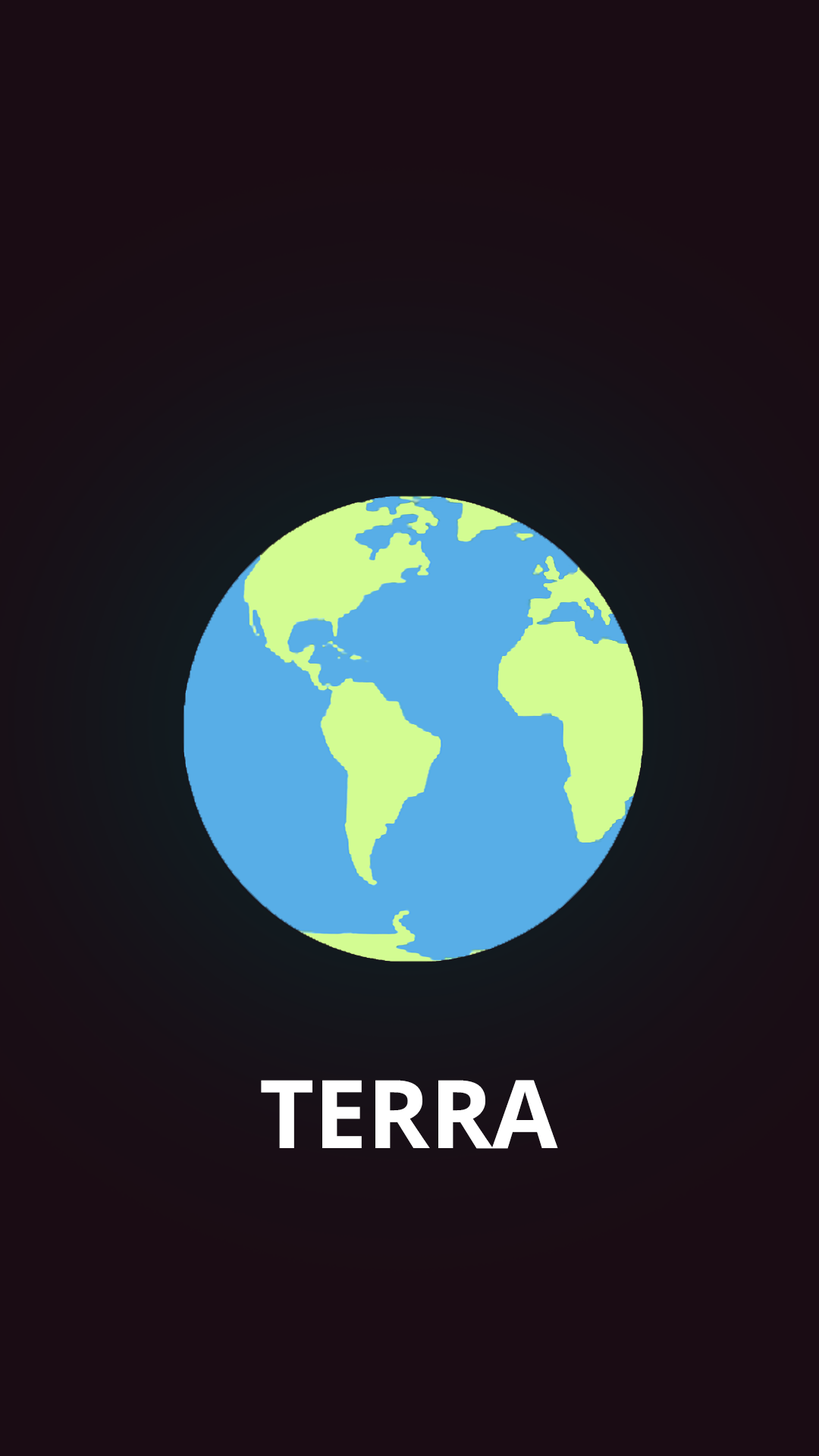
<style>
.page{position:relative;width:819px;height:1456px;background:#1a0c14}
.page>*{position:absolute;margin:0}
.t1{font:94.8px "OpenSans-Bold";color:#ffffff}
</style>
<div class="page">
<p class="t1" style="left:261px;top:1080px;width:297px;height:69px">TERRA</p>
</div>
